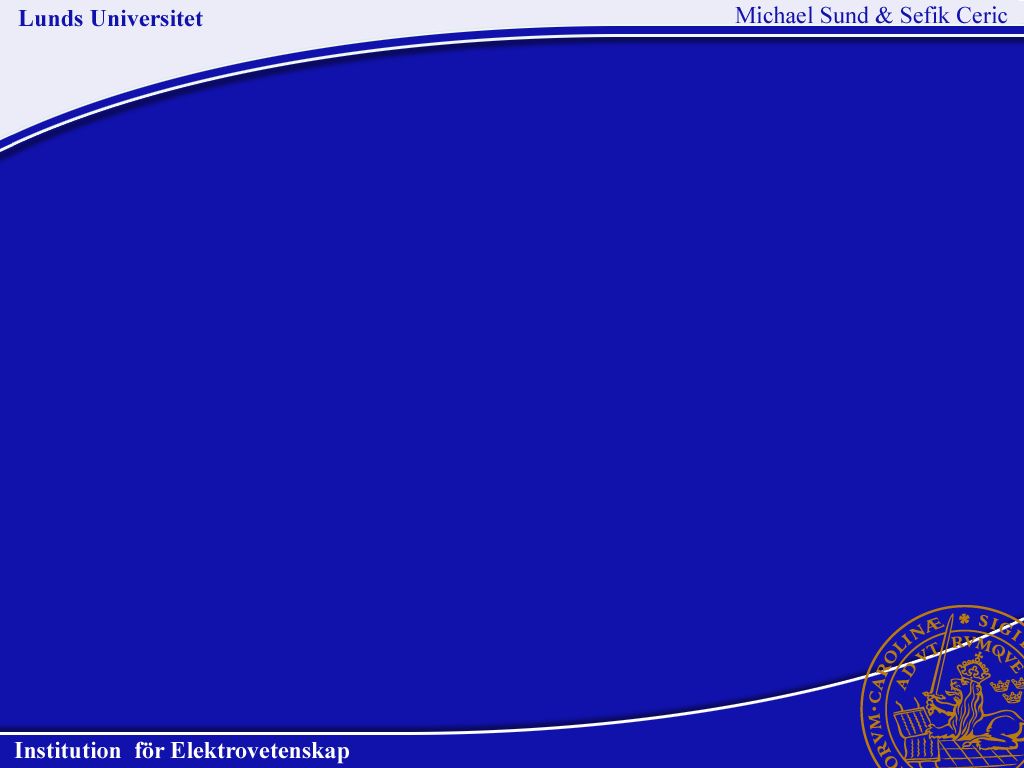
<style>
.page{position:relative;width:1024px;height:768px;background:#1111ac}
.page>*{position:absolute;margin:0}
.t1{font:24px "TimesNewRomanPSMT";color:#1111ac}
.t2{font:24px "TimesNewRomanPS-BoldMT";color:#1111ac}
.t3{font:24px "TimesNewRomanPS-BoldMT";color:#ffffff}
</style>
<div class="page">
<p class="t1" style="left:735px;top:6px;width:273px;height:18px">Michael Sund &amp; Sefik Ceric</p>
<p class="t2" style="left:18px;top:9px;width:185px;height:18px">Lunds Universitet</p>
<p class="t3" style="left:14px;top:741px;width:335px;height:23px">Institution  för Elektrovetenskap</p>
</div>
